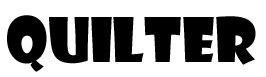
<style>
.page{position:relative;width:266px;height:77px;background:#ffffff}
.page>*{position:absolute;margin:0}
.t1{font:60px "ShowcardGothic-Reg";color:#000000}
</style>
<div class="page">
<p class="t1" style="left:7px;top:15px;width:249px;height:57px">QUILTER</p>
</div>
